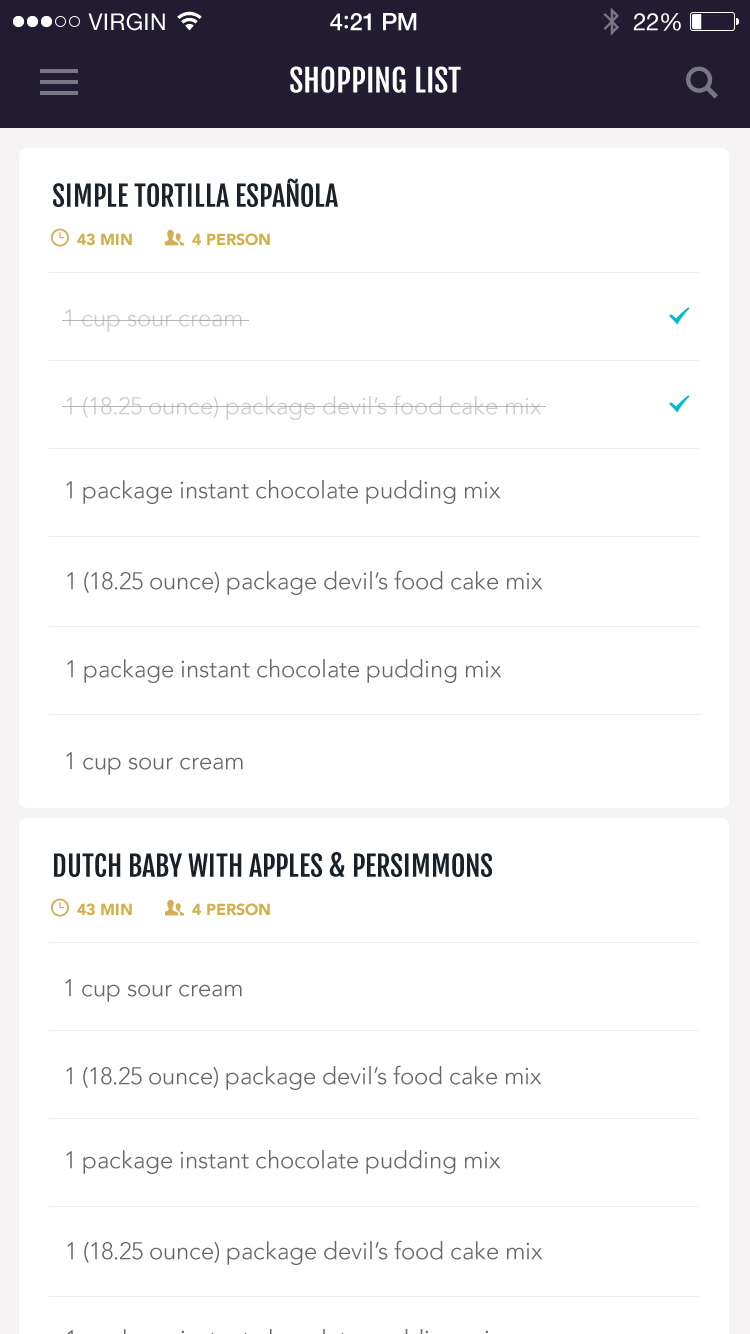
<style>
.page{position:relative;width:750px;height:1334px;background:#ffffff}
.page>*{position:absolute;margin:0}
.t1{font:31px "FjallaOne-Regular";color:#ffffff}
.t2{font:28px "FjallaOne-Regular";color:#1b2229}
.t3{font:16px "Avenir-Black";color:#d4af4e}
.t4{font:24px "Avenir-Light";color:#cccccc}
.t5{font:24px "Avenir-Light";color:#666666}
.t6{font:28px "FjallaOne-Regular";color:#192027}
</style>
<div class="page">
<p class="t1" style="left:290px;top:66px;width:171px;height:27px">SHOPPING LIST</p>
<p class="t2" style="left:53px;top:178px;width:285px;height:29px">SIMPLE TORTILLA ESPAÑOLA</p>
<p class="t3" style="left:77px;top:233px;width:55px;height:13px">43 MIN</p>
<p class="t3" style="left:192px;top:233px;width:78px;height:13px">4 PERSON</p>
<p class="t4" style="left:65px;top:309px;width:177px;height:23px">1 cup sour cream</p>
<p class="t4" style="left:66px;top:395px;width:476px;height:25px">1 (18.25 ounce) package devil’s food cake mix</p>
<p class="t5" style="left:66px;top:480px;width:435px;height:24px">1 package instant chocolate pudding mix</p>
<p class="t5" style="left:67px;top:570px;width:476px;height:25px">1 (18.25 ounce) package devil’s food cake mix</p>
<p class="t5" style="left:67px;top:659px;width:435px;height:24px">1 package instant chocolate pudding mix</p>
<p class="t5" style="left:66px;top:752px;width:177px;height:23px">1 cup sour cream</p>
<p class="t6" style="left:54px;top:852px;width:438px;height:25px">DUTCH BABY WITH APPLES &amp; PERSIMMONS</p>
<p class="t3" style="left:77px;top:903px;width:55px;height:13px">43 MIN</p>
<p class="t3" style="left:192px;top:903px;width:78px;height:13px">4 PERSON</p>
<p class="t5" style="left:65px;top:979px;width:177px;height:23px">1 cup sour cream</p>
<p class="t5" style="left:66px;top:1065px;width:476px;height:25px">1 (18.25 ounce) package devil’s food cake mix</p>
<p class="t5" style="left:66px;top:1150px;width:435px;height:24px">1 package instant chocolate pudding mix</p>
<p class="t5" style="left:67px;top:1240px;width:476px;height:25px">1 (18.25 ounce) package devil’s food cake mix</p>
</div>
